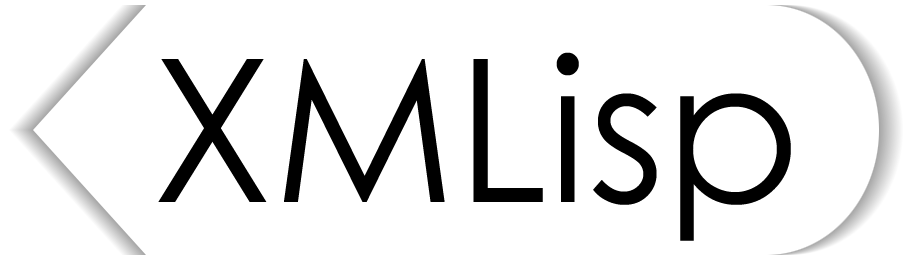
<style>
.page{position:relative;width:915px;height:259px;background:#ffffff}
.page>*{position:absolute;margin:0}
.t1{font:199px "CenturyGothic";color:#000000}
</style>
<div class="page">
<p class="t1" style="left:158px;top:52px;width:633px;height:189px">XMLisp</p>
</div>
